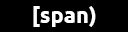
<style>
.page{position:relative;width:128px;height:32px;background:#000000}
.page>*{position:absolute;margin:0}
.t1{font:22px "Ubuntu-Bold";color:#fefefe}
</style>
<div class="page">
<p class="t1" style="left:33px;top:6px;width:63px;height:21px">(span]</p>
</div>
